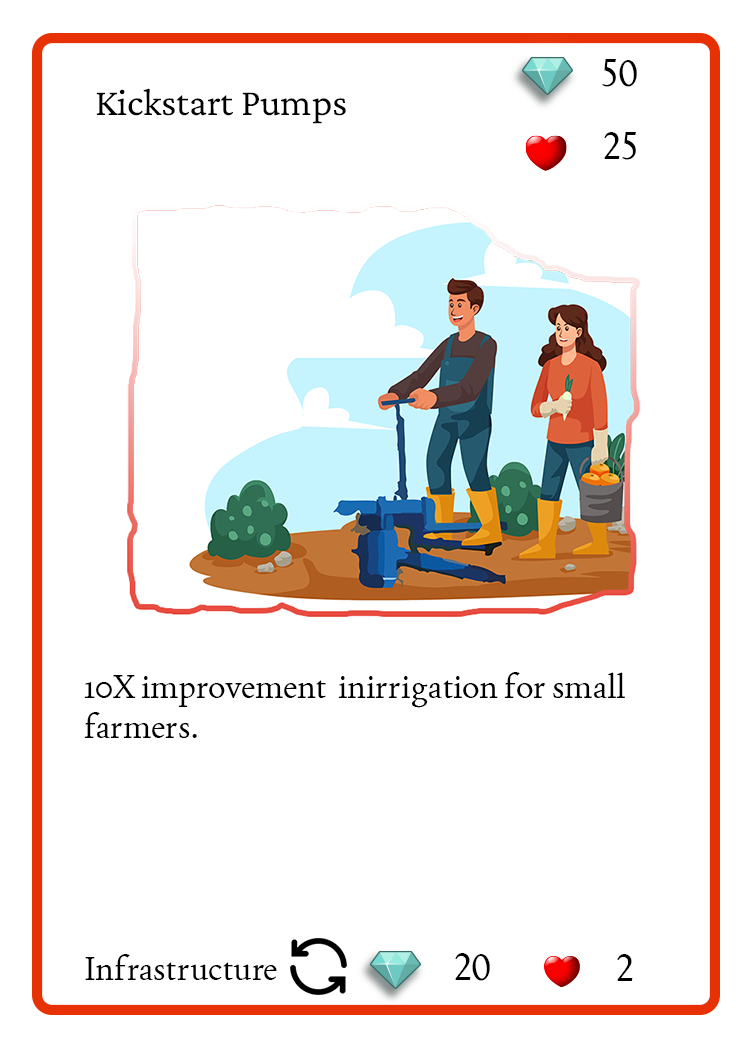
<style>
.page{position:relative;width:750px;height:1050px;background:#ffffff}
.page>*{position:absolute;margin:0}
.t1{font:37.5px "Joan-Regular";color:#000000;text-transform:uppercase}
.t2{font:38.9px "CrimsonPro-Regular";color:#000000}
.t3{font:33.3px "Joan-Regular";color:#000000}
</style>
<div class="page">
<p class="t1" style="left:602px;top:59px;width:35px;height:28px">50</p>
<p class="t2" style="left:96px;top:88px;width:250px;height:36px">Kickstart Pumps</p>
<p class="t1" style="left:604px;top:132px;width:32px;height:28px">25</p>
<p class="t3" style="left:84px;top:672px;width:541px;height:66px">10X improvement  inirrigation for small farmers.</p>
<p class="t1" style="left:455px;top:953px;width:35px;height:28px">20</p>
<p class="t3" style="left:85px;top:954px;width:192px;height:26px">Infrastructure</p>
<p class="t1" style="left:617px;top:954px;width:16px;height:27px">2</p>
</div>
